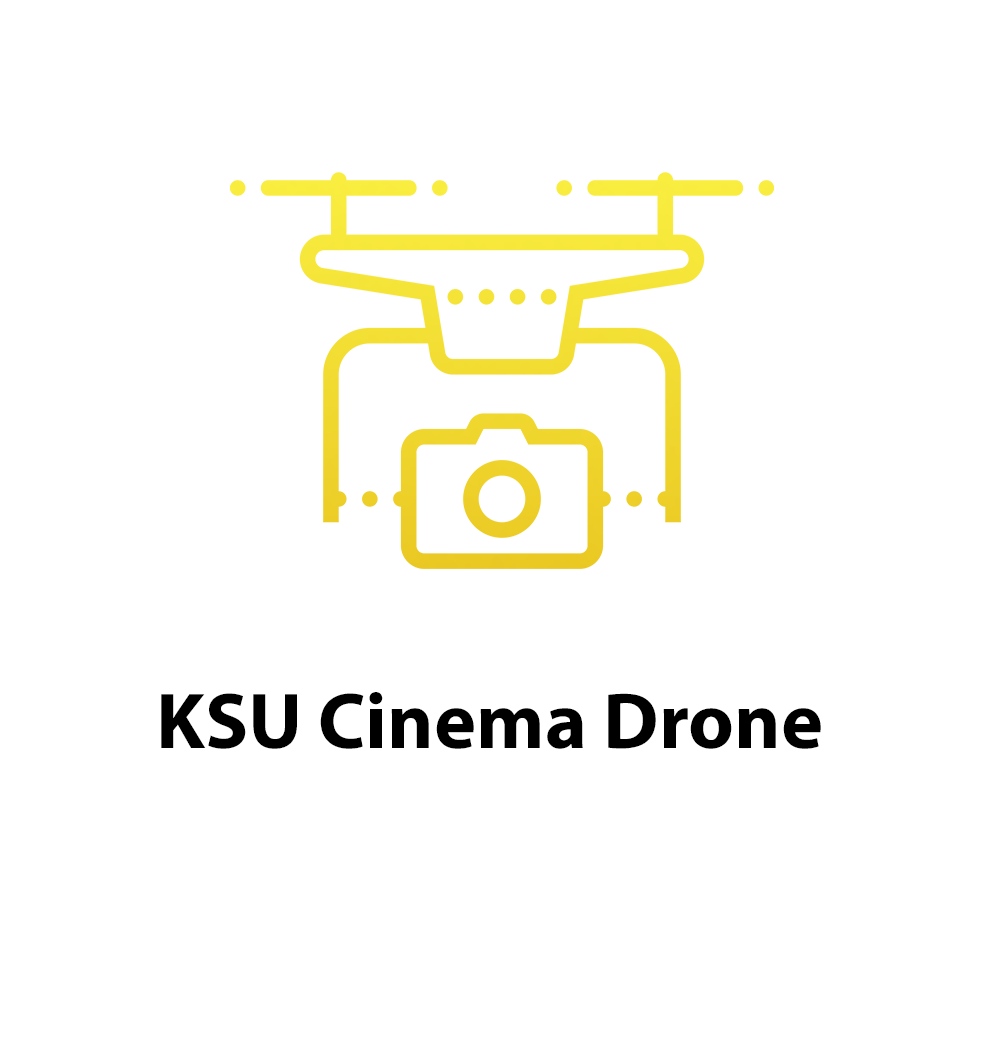
<style>
.page{position:relative;width:1000px;height:1038px;background:#ffffff}
.page>*{position:absolute;margin:0}
.t1{font:79.7px "MyriadPro-Bold";color:#000000}
</style>
<div class="page">
<p class="t1" style="left:161px;top:692px;width:660px;height:57px">KSU Cinema Drone</p>
</div>
